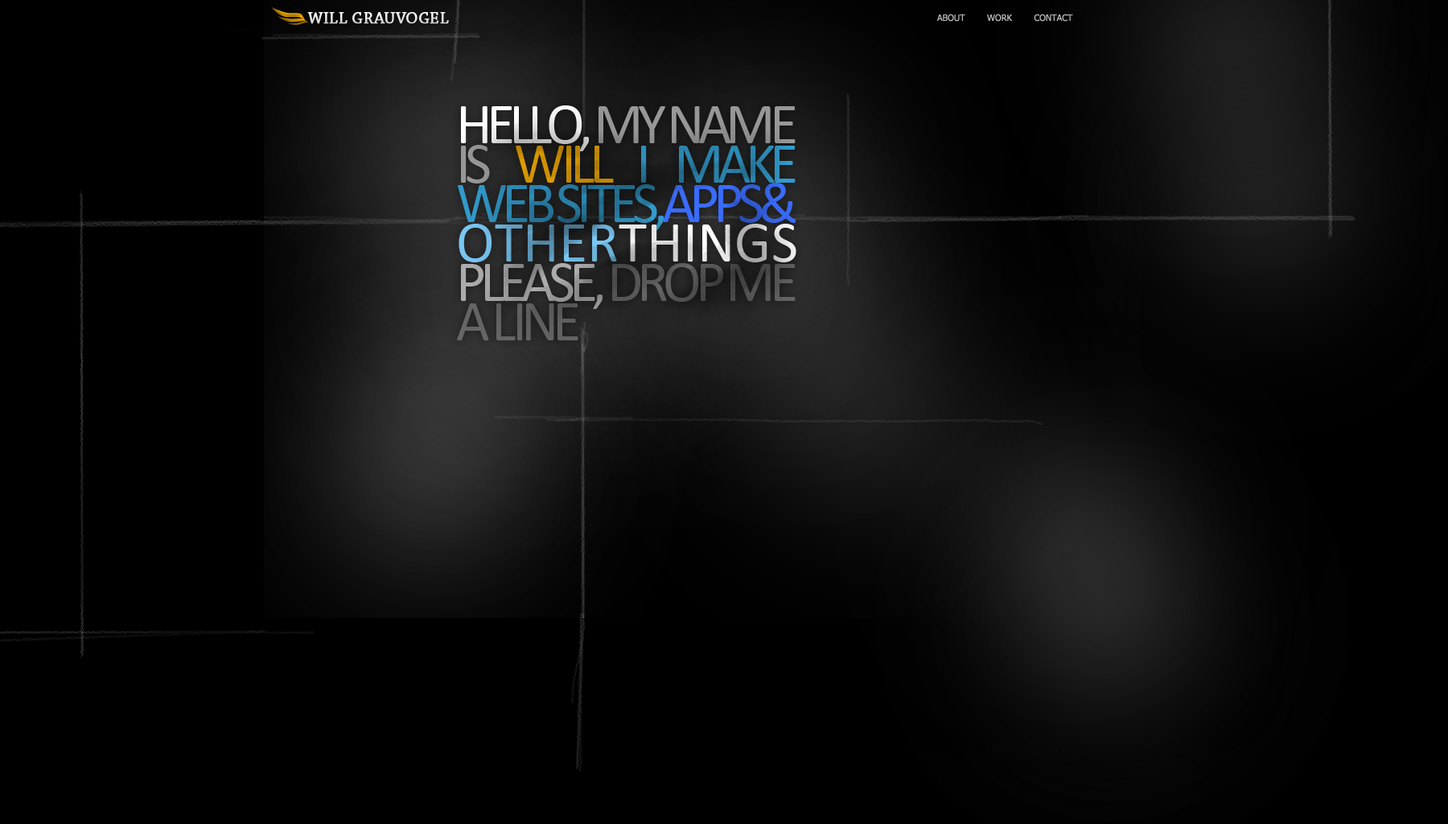
<style>
.page{position:relative;width:1448px;height:824px;background:#000000}
.page>*{position:absolute;margin:0}
.t1{font:16.5px "ChaparralPro-Regular";color:#e9e9e9;text-transform:uppercase;font-weight:bold}
.t2{font:8.8px "Tahoma";color:#b8b8b8;text-transform:uppercase}
.t3{font:57.9px/39.4px "Calibri";letter-spacing:-0.1em;color:#329bcc;text-transform:uppercase}
.t4{font:57.9px/39.4px "Calibri";letter-spacing:-0.1em;color:#ffffff;text-transform:uppercase}
.t5{font:57.9px/39.4px "Calibri";letter-spacing:-0.1em;color:#989898;text-transform:uppercase}
.t6{font:57.9px/39.4px "Calibri";letter-spacing:-0.1em;color:#ffb400;text-transform:uppercase}
.t7{font:57.9px/39.4px "Calibri";letter-spacing:-0.1em;color:#3a6cfc;text-transform:uppercase}
.t8{font:57.9px/39.4px "Calibri";letter-spacing:-0.1em;color:#79c6f2;text-transform:uppercase}
.t9{font:57.9px/39.4px "Calibri";letter-spacing:-0.1em;color:#acacac;text-transform:uppercase}
.t10{font:57.9px/39.4px "Calibri";letter-spacing:-0.1em;color:#666666;text-transform:uppercase}
</style>
<div class="page">
<p class="t1" style="left:307px;top:12px;width:142px;height:12px">Will Grauvogel</p>
<p class="t2" style="left:936px;top:14px;width:137px;height:8px">About        Work        Contact</p>
<p class="t3" style="left:457px;top:105px;width:339px;height:235px;text-align:justify"><span class="t4">Hello,</span><span class="t5"> My Name is </span><span class="t6">Will </span>I Make Web Sites,<span class="t7">Apps&amp; </span><span class="t8">Other</span><span class="t4">Things </span><span class="t9">Please, </span><span class="t10">Drop me a line</span></p>
</div>
